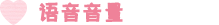
<style>
.page{position:relative;width:219px;height:25px;background:#ffffff}
.page>*{position:absolute;margin:0}
.t1{font:21.2px "shetumodengxiaofangti";color:#ef8299;font-weight:bold}
</style>
<div class="page">
<p class="t1" style="left:39px;top:2px;width:84px;height:20px">语音音量</p>
</div>
